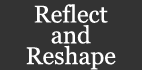
<style>
.page{position:relative;width:142px;height:70px;background:#333333}
.page>*{position:absolute;margin:0}
.t1{font:24px "Georgia";color:#ffffff}
</style>
<div class="page">
<p class="t1" style="left:26px;top:4px;width:90px;height:66px;text-align:center">Reflect<br>and<br>Reshape</p>
</div>
